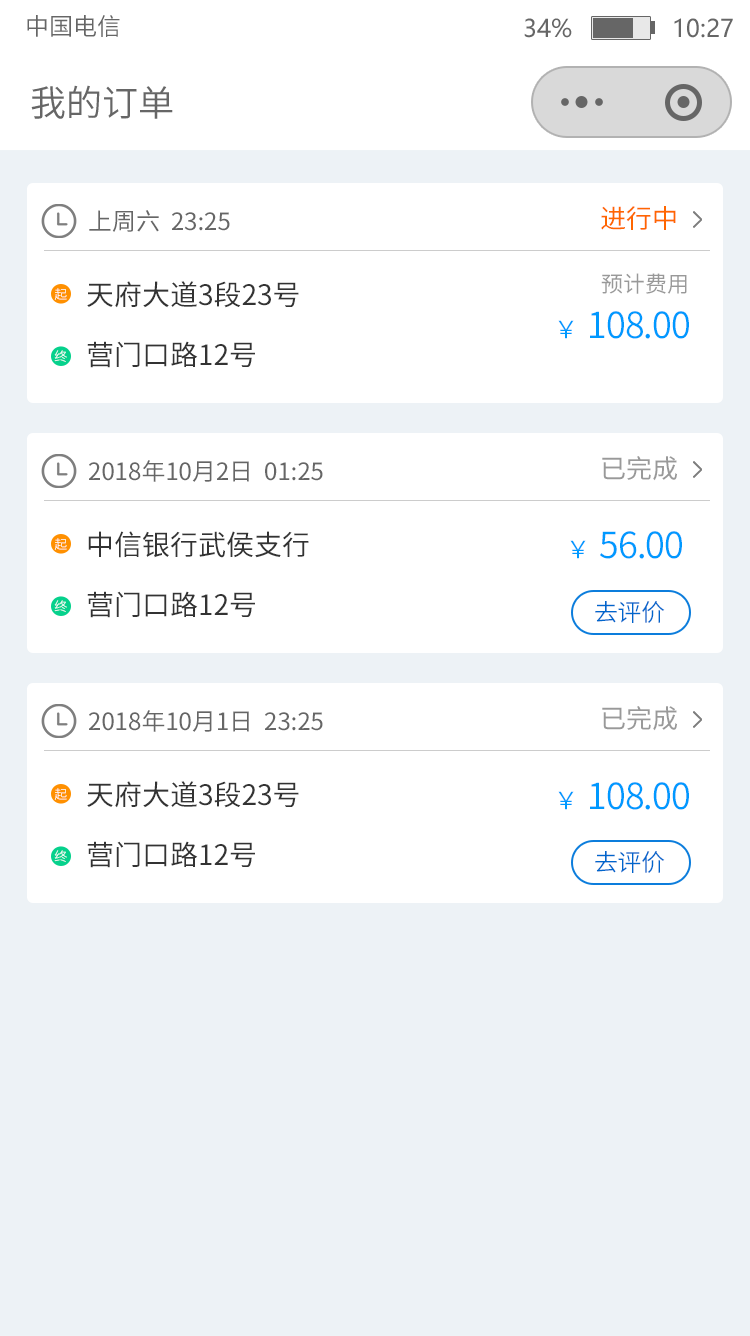
<style>
.page{position:relative;width:750px;height:1336px;background:#ffffff}
.page>*{position:absolute;margin:0}
.t1{font:24px "SourceHanSansCN-Normal";color:#666666}
.t2{font:24px "MicrosoftYaHei";color:#666666}
.t3{font:36px "SourceHanSansCN-Normal";color:#666666}
.t4{font:26px "SourceHanSansCN-Regular";color:#ff6600}
.t5{font:24px "SourceHanSansCN-Regular";color:#666666}
.t6{font:28px/60px "SourceHanSansCN-Regular";color:#333333}
.t7{font:22px "SourceHanSansCN-Regular";color:#999999}
.t8{font:12.7px "SourceHanSansCN-Normal";letter-spacing:-0.025em}
.t9{font:36px "SourceHanSansCN-Normal";letter-spacing:-0.025em;color:#0099ff}
.t10{font:24px "SourceHanSansCN-Normal";letter-spacing:-0.025em;color:#0099ff}
.t11{font:26px "SourceHanSansCN-Regular";color:#999999}
.t12{font:24px "SourceHanSansCN-Normal";letter-spacing:-0.025em;color:#0066cc}
</style>
<div class="page">
<p class="t1" style="left:27px;top:15px;width:93px;height:22px">中国电信</p>
<p class="t2" style="left:524px;top:18px;width:209px;height:20px">34%              10:27</p>
<p class="t3" style="left:31px;top:85px;width:142px;height:34px">我的订单</p>
<p class="t4" style="left:601px;top:206px;width:75px;height:24px">进行中</p>
<p class="t5" style="left:89px;top:210px;width:141px;height:22px">上周六  23:25</p>
<p class="t6" style="left:87px;top:281px;width:212px;height:87px">天府大道3段23号<br>营门口路12号</p>
<p class="t7" style="left:601px;top:273px;width:86px;height:21px">预计费用</p>
<p class="t8" style="left:54px;top:288px;width:13px;height:12px">起</p>
<p class="t9" style="left:558px;top:311px;width:131px;height:28px"><span class="t10">￥  </span>108.00</p>
<p class="t8" style="left:54px;top:350px;width:13px;height:12px">终</p>
<p class="t5" style="left:89px;top:460px;width:234px;height:22px">2018年10月2日  01:25</p>
<p class="t11" style="left:602px;top:456px;width:75px;height:25px">已完成</p>
<p class="t6" style="left:87px;top:531px;width:222px;height:87px">中信银行武侯支行<br>营门口路12号</p>
<p class="t9" style="left:570px;top:531px;width:112px;height:28px"><span class="t10">￥  </span>56.00</p>
<p class="t8" style="left:54px;top:538px;width:13px;height:12px">起</p>
<p class="t8" style="left:54px;top:600px;width:13px;height:12px">终</p>
<p class="t12" style="left:595px;top:601px;width:70px;height:22px">去评价</p>
<p class="t5" style="left:89px;top:710px;width:234px;height:22px">2018年10月1日  23:25</p>
<p class="t11" style="left:602px;top:706px;width:75px;height:25px">已完成</p>
<p class="t6" style="left:87px;top:781px;width:212px;height:87px">天府大道3段23号<br>营门口路12号</p>
<p class="t9" style="left:558px;top:782px;width:131px;height:28px"><span class="t10">￥  </span>108.00</p>
<p class="t8" style="left:54px;top:788px;width:13px;height:12px">起</p>
<p class="t8" style="left:54px;top:850px;width:13px;height:12px">终</p>
<p class="t12" style="left:595px;top:851px;width:70px;height:22px">去评价</p>
</div>
